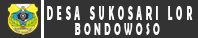
<style>
.page{position:relative;width:198px;height:38px;background:#333333}
.page>*{position:absolute;margin:0}
.t1{font:20.2px "SourceSansPro-Black";letter-spacing:0.4em;color:#fefefe;scale:0.46 1}
.t2{font:18.1px "BerlinSansFBDemi-Bold";letter-spacing:0.4em;color:#ffffff;scale:0.48 1}
</style>
<div class="page">
<p class="t1" style="left:47px;top:6px;width:146px;height:14px">DESA SUKOSARI LOR</p>
<p class="t2" style="left:75px;top:23px;width:85px;height:12px">BONDOWOSO</p>
</div>
